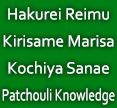
<style>
.page{position:relative;width:117px;height:108px;background:#007f15}
.page>*{position:absolute;margin:0}
.t1{font:17px "Corbel";color:#ffffff}
.t2{font:17px "Corbel";color:#ffffff;scale:0.76 1}
</style>
<div class="page">
<p class="t1" style="left:8px;top:7px;width:101px;height:13px">Hakurei Reimu</p>
<p class="t1" style="left:3px;top:35px;width:111px;height:12px">Kirisame Marisa</p>
<p class="t1" style="left:8px;top:61px;width:101px;height:17px">Kochiya Sanae</p>
<p class="t2" style="left:2px;top:88px;width:113px;height:17px">Patchouli Knowledge</p>
</div>
